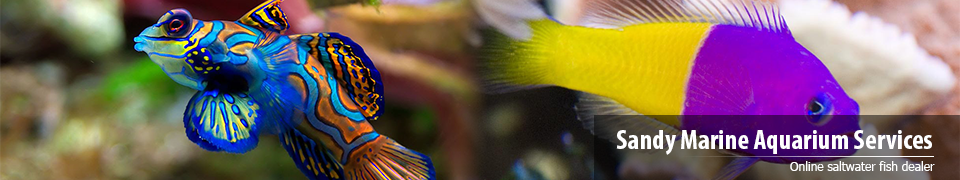
<style>
.page{position:relative;width:960px;height:180px}
.page>*{position:absolute;margin:0}
.t1{font:28px "MyriadPro-BoldCond";color:#ffffff}
.t2{font:12px "Tahoma";color:#ffffff}
</style>
<div class="page">
<p class="t1" style="left:616px;top:130px;width:316px;height:25px">Sandy Marine Aquarium Services</p>
<p class="t2" style="left:790px;top:161px;width:145px;height:10px">Online saltwater fish dealer</p>
</div>
